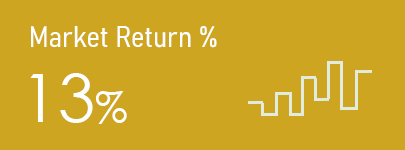
<style>
.page{position:relative;width:405px;height:150px;background:#cda521}
.page>*{position:absolute;margin:0}
.t1{font:29.2px "Bahnschrift-SemiLightSemiCondensed";color:#ffffff}
.t2{font:66.7px "CenturyGothic";color:#ffffff}
.t3{font:41.7px "CenturyGothic";color:#ffffff}
</style>
<div class="page">
<p class="t1" style="left:31px;top:26px;width:186px;height:22px">Market Return %</p>
<p class="t2" style="left:30px;top:73px;width:97px;height:51px">13<span class="t3">%</span></p>
</div>
